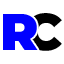
<style>
.page{position:relative;width:64px;height:64px;background:#ffffff}
.page>*{position:absolute;margin:0}
.t1{font:51.6px "Montserrat-Black";color:#0000ff}
.t2{font:51.6px "Montserrat-Black";color:#000000}
</style>
<div class="page">
<p class="t1" style="left:3px;top:14px;width:35px;height:36px">R</p>
<p class="t2" style="left:25px;top:13px;width:37px;height:38px">C</p>
</div>
